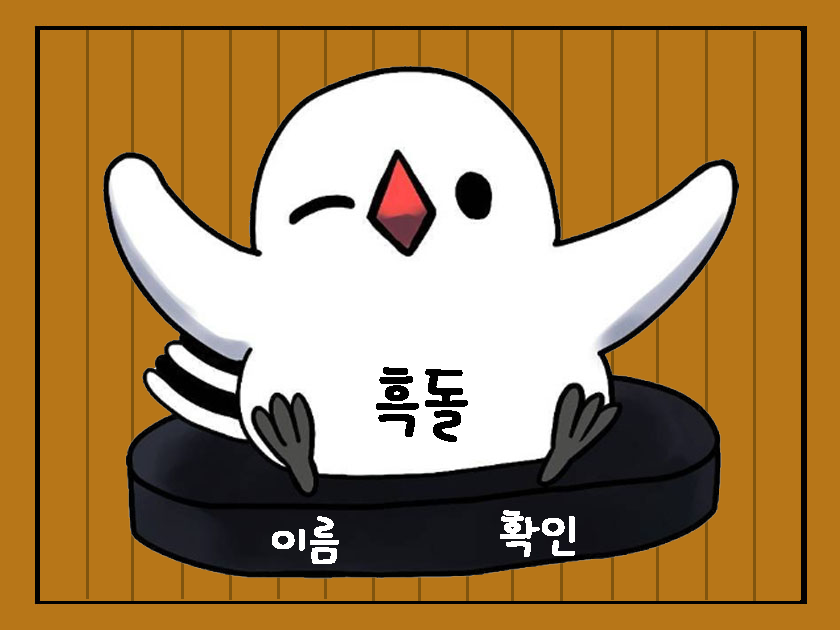
<style>
.page{position:relative;width:840px;height:630px;background:#b77618}
.page>*{position:absolute;margin:0}
.t1{font:75px "OTSoolaejabkiR";color:#010101;font-weight:bold}
.t2{font:12px "OTSoolaejabkiR";color:#ffffff;font-weight:bold}
.t3{font:50px "OTSoolaejabkiR";color:#ffffff;font-weight:bold}
</style>
<div class="page">
<p class="t1" style="left:376px;top:367px;width:92px;height:75px">흑돌</p>
<p class="t2" style="left:500px;top:510px;width:75px;height:47px;text-align:center">확인</p>
<p class="t3" style="left:272px;top:516px;width:67px;height:48px">이름</p>
</div>
